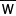
<style>
.page{position:relative;width:16px;height:16px;background:#ffffff}
.page>*{position:absolute;margin:0}
.t1{font:14px "MyriadPro-Regular";color:#000000}
</style>
<div class="page">
<p class="t1" style="left:2px;top:3px;width:12px;height:10px">W</p>
</div>
